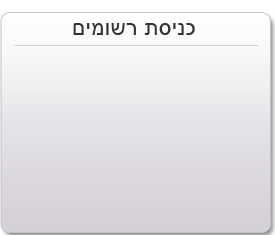
<style>
.page{position:relative;width:275px;height:235px}
.page>*{position:absolute;margin:0}
.t1{font:22px "ArialMT";letter-spacing:0.015em;color:#333333}
</style>
<div class="page">
<p class="t1" style="left:73px;top:23px;width:122px;height:12px">כניסת רשומים</p>
</div>
